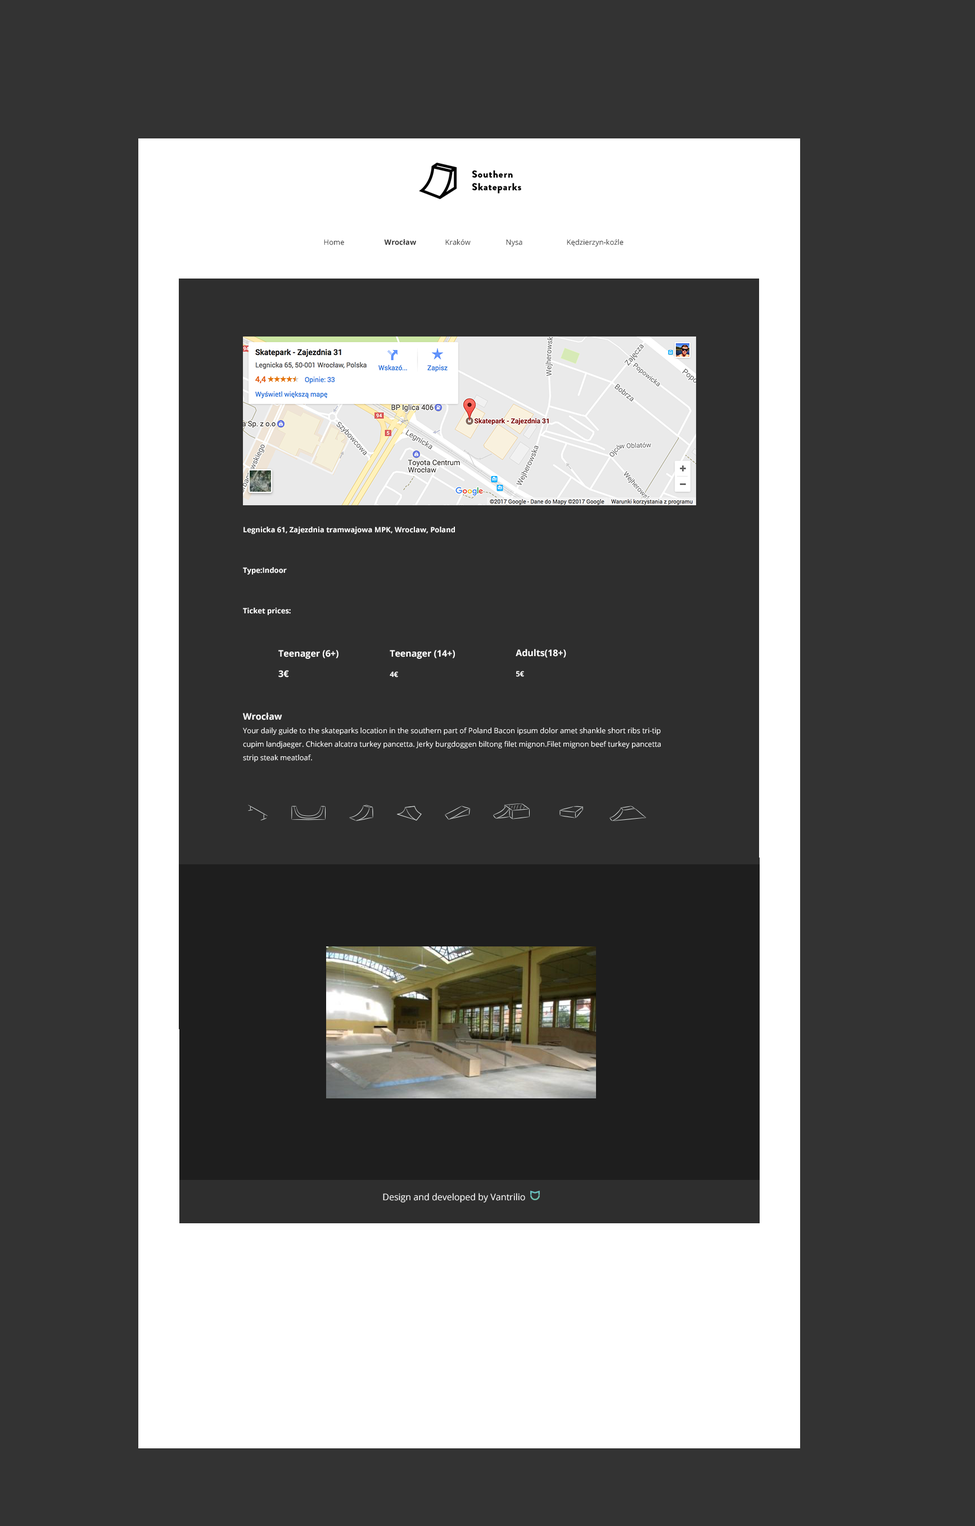
<style>
.page{position:relative;width:975px;height:1526px;background:#333333}
.page>*{position:absolute;margin:0}
.t1{font:7.3px "OpenSans";color:#2e2e2e}
.t2{font:7.3px "OpenSans-Bold";color:#2e2e2e}
.t3{font:7.3px/20.2px "OpenSans-Bold";color:#ffffff}
.t4{font:9px/20.2px "OpenSans-Bold";color:#ffffff}
.t5{font:7.3px/13.5px "OpenSans";color:#ffffff}
.t6{font:9px "OpenSans";color:#ffffff}
</style>
<div class="page">
<p class="t1" style="left:324px;top:239px;width:300px;height:7px">Home   <span class="t2">Wrocław</span>  Kraków  Nysa   Kędzierzyn-koźle</p>
<p class="t3" style="left:243px;top:526px;width:212px;height:89px">Legnicka 61, Zajezdnia tramwajowa MPK, Wroclaw, Poland<br><br>Type:Indoor<br><br>Ticket prices:</p>
<p class="t4" style="left:278px;top:650px;width:61px;height:27px">Teenager (6+)<br>3€</p>
<p class="t4" style="left:390px;top:650px;width:65px;height:27px">Teenager (14+)<br><span class="t3">4€</span></p>
<p class="t4" style="left:516px;top:649px;width:50px;height:28px">Adults(18+)<br><span class="t3">5€</span></p>
<p class="t5" style="left:243px;top:712px;width:418px;height:50px"><span class="t4">Wrocław<br></span>Your daily guide to the skateparks location in the southern part of Poland Bacon ipsum dolor amet shankle short ribs tri-tip cupim landjaeger. Chicken alcatra turkey pancetta. Jerky burgdoggen biltong filet mignon.Filet mignon beef turkey pancetta strip steak meatloaf.</p>
<p class="t6" style="left:383px;top:1192px;width:142px;height:10px">Design and developed by Vantrilio</p>
</div>
